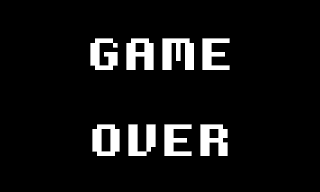
<style>
.page{position:relative;width:320px;height:192px;background:#000000}
.page>*{position:absolute;margin:0}
.t1{font:72px "8-Bit-Madness";color:#ffffff}
</style>
<div class="page">
<p class="t1" style="left:90px;top:38px;width:140px;height:118px;text-align:center">GAME<br>OVER</p>
</div>
